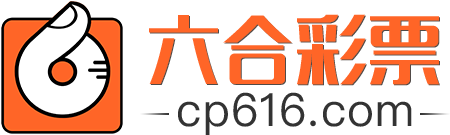
<style>
.page{position:relative;width:450px;height:135px;background:#ffffff}
.page>*{position:absolute;margin:0}
.t1{font:72.9px "MFLangQian_Noncommercial-Regular";letter-spacing:0.01em;color:#ff6527}
.t2{font:45.8px "PingFangSC-Regular";letter-spacing:0.025em;color:#333333}
</style>
<div class="page">
<p class="t1" style="left:149px;top:14px;width:290px;height:71px">六合彩票</p>
<p class="t2" style="left:178px;top:92px;width:234px;height:43px">cp616.com</p>
</div>
